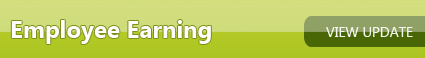
<style>
.page{position:relative;width:425px;height:58px}
.page>*{position:absolute;margin:0}
.t1{font:24px "SegoeUI-Bold";color:#fefefe}
.t2{font:14px "SegoeUI";color:#f6f7f1}
</style>
<div class="page">
<p class="t1" style="left:11px;top:20px;width:200px;height:24px">Employee Earning</p>
<p class="t2" style="left:326px;top:27px;width:87px;height:10px">VIEW UPDATE</p>
</div>
